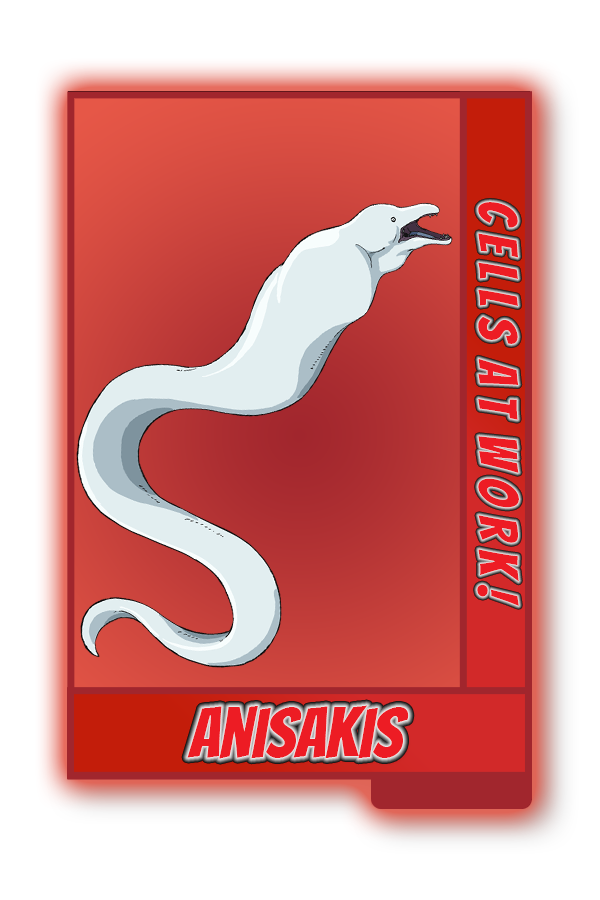
<style>
.page{position:relative;width:600px;height:900px;background:#ffffff}
.page>*{position:absolute;margin:0}
.t1{font:54px "Bangers-Regular";color:#ed1c24}
.t2{font:70px "Bangers-Regular";color:#ed1c24}
</style>
<div class="page">
<p class="t1" style="left:477px;top:202px;width:42px;height:404px;rotate:90deg">C e l l S  A t  W o r k !</p>
<p class="t2" style="left:187px;top:705px;width:222px;height:54px">Anisakis</p>
</div>
